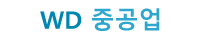
<style>
.page{position:relative;width:200px;height:40px;background:#ffffff}
.page>*{position:absolute;margin:0}
.t1{font:24px "MalgunGothicBold";color:#2da7cf}
.t2{font:24px "MalgunGothicBold";color:#0086b2}
</style>
<div class="page">
<p class="t1" style="left:40px;top:8px;width:120px;height:23px"><span class="t2">WD</span> 중공업</p>
</div>
